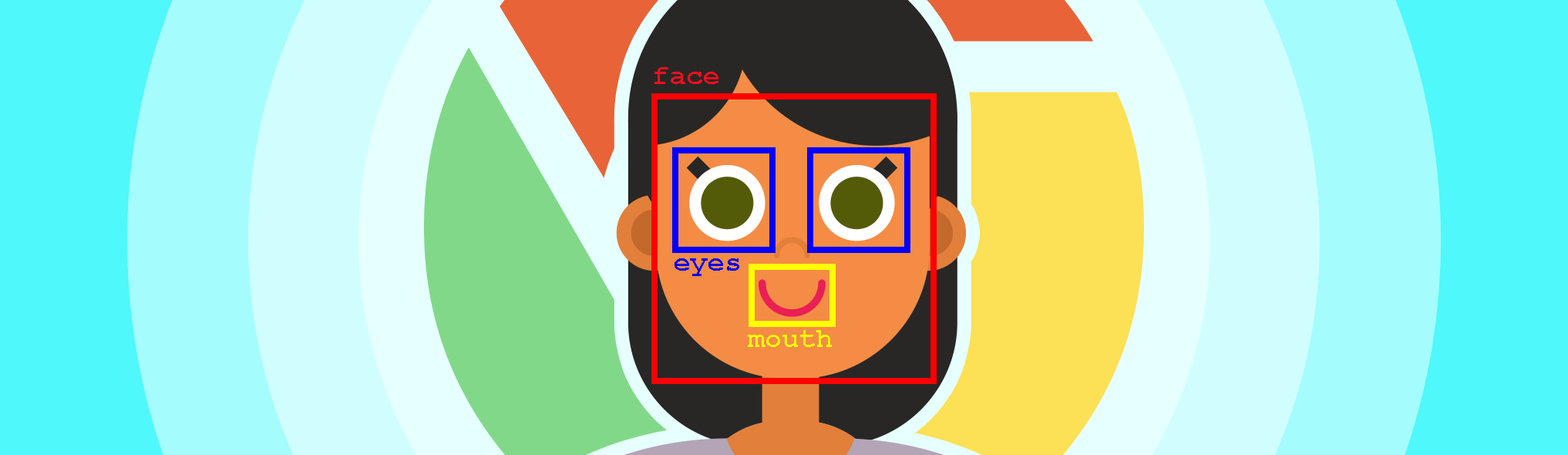
<style>
.page{position:relative;width:1568px;height:455px}
.page>*{position:absolute;margin:0}
.t1{font:27.8px "CourierNewPS-BoldMT";color:#fc0d1c}
.t2{font:27.8px "CourierNewPS-BoldMT";color:#0000ff}
.t3{font:27.8px "CourierNewPS-BoldMT";color:#ffff00}
</style>
<div class="page">
<p class="t1" style="left:654px;top:67px;width:64px;height:17px">face</p>
<p class="t2" style="left:675px;top:258px;width:64px;height:18px">eyes</p>
<p class="t3" style="left:748px;top:330px;width:84px;height:17px">mouth</p>
</div>
